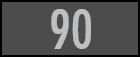
<style>
.page{position:relative;width:140px;height:57px;background:#4c4c4c}
.page>*{position:absolute;margin:0}
.t1{font:53.3px "FuturaCondensed";color:#bebfc1}
</style>
<div class="page">
<p class="t1" style="left:51px;top:9px;width:40px;height:40px">90</p>
</div>
